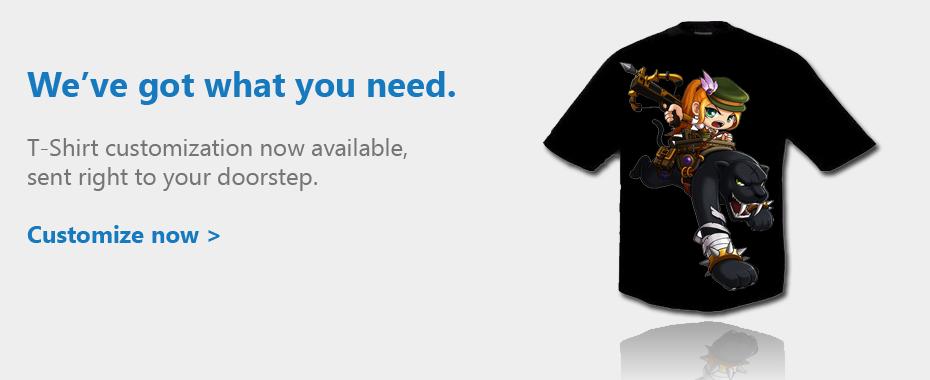
<style>
.page{position:relative;width:930px;height:380px;background:#eeeeee}
.page>*{position:absolute;margin:0}
.t1{font:35px "KhmerUI-Bold";color:#177abe}
.t2{font:24px "KhmerUI";color:#757575}
.t3{font:24px "KhmerUI-Bold";color:#177abe}
</style>
<div class="page">
<p class="t1" style="left:27px;top:71px;width:428px;height:34px">We’ve got what you need.</p>
<p class="t2" style="left:27px;top:138px;width:380px;height:53px">T-Shirt customization now available,<br>sent right to your doorstep.</p>
<p class="t3" style="left:27px;top:225px;width:193px;height:18px">Customize now &gt;</p>
</div>
